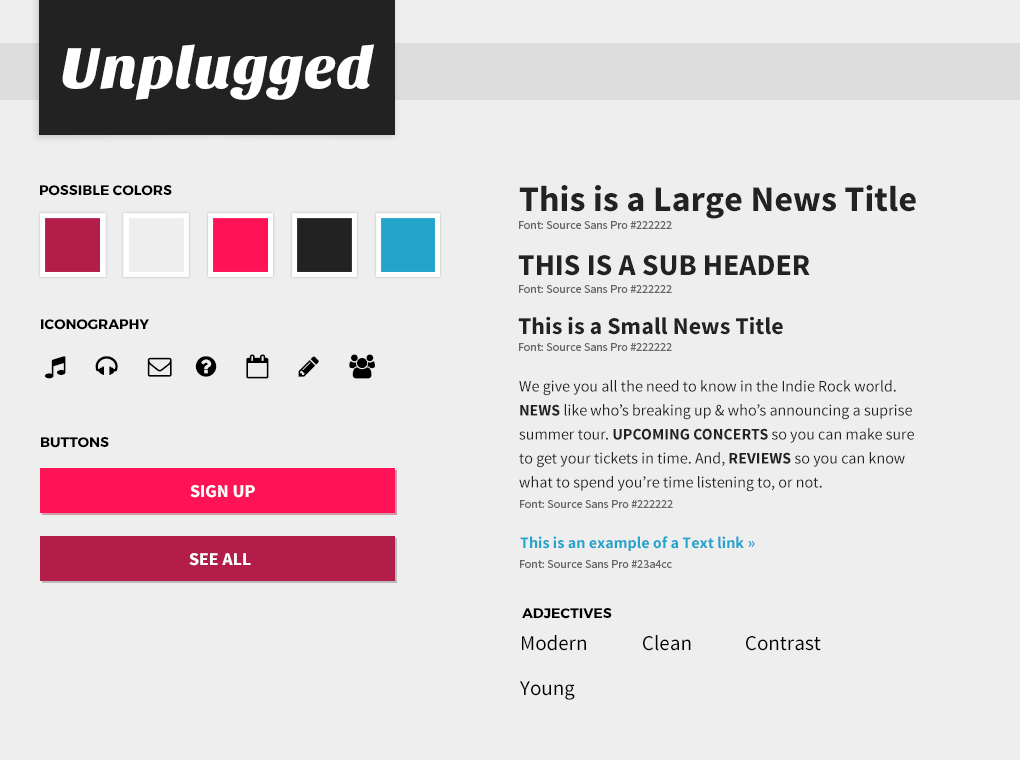
<style>
.page{position:relative;width:1020px;height:760px;background:#eeeeee}
.page>*{position:absolute;margin:0}
.t1{font:60px "SansitaOne";color:#ffffff}
.t2{font:14px "Montserrat-Bold";color:#000000;text-transform:uppercase}
.t3{font:36px "SourceSansPro-Bold";color:#222222}
.t4{font:12px "SourceSansPro-Regular";color:#666666}
.t5{font:30px "SourceSansPro-Bold";color:#222222;text-transform:uppercase}
.t6{font:24px "SourceSansPro-Bold";color:#222222}
.t7{font:14px "Montserrat-Bold";color:#000000}
.t8{font:16px/24px "SourceSansPro-Regular";color:#222222}
.t9{font:16px/24px "SourceSansPro-Bold";color:#222222}
.t10{font:16px/24px "SourceSansPro-Bold";color:#222222;text-transform:uppercase}
.t11{font:18px "SourceSansPro-Bold";color:#ffffff}
.t12{font:16px "SourceSansPro-Bold";color:#23a4cc}
.t13{font:21px "SourceSansPro-Regular";color:#000000}
</style>
<div class="page">
<p class="t1" style="left:62px;top:44px;width:312px;height:56px">Unplugged</p>
<p class="t2" style="left:40px;top:185px;width:132px;height:11px">Possible Colors</p>
<p class="t3" style="left:519px;top:185px;width:397px;height:34px">This is a Large News Title</p>
<p class="t4" style="left:519px;top:221px;width:153px;height:8px">Font: Source Sans Pro #222222</p>
<p class="t5" style="left:518px;top:255px;width:292px;height:21px">This is a Sub Header</p>
<p class="t4" style="left:519px;top:285px;width:153px;height:8px">Font: Source Sans Pro #222222</p>
<p class="t6" style="left:518px;top:316px;width:265px;height:19px">This is a Small News Title</p>
<p class="t7" style="left:41px;top:319px;width:108px;height:11px">ICONOGRAPHY</p>
<p class="t4" style="left:519px;top:343px;width:153px;height:8px">Font: Source Sans Pro #222222</p>
<p class="t8" style="left:519px;top:380px;width:395px;height:112px">We give you all the need to know in the Indie Rock world. <span class="t9">NEWS </span>like who’s breaking up &amp; who’s announcing a suprise summer tour. <span class="t10">Upcoming concerts</span> so you can make sure to get your tickets in time. And, <span class="t10">reviews </span>so you can know what to spend you’re time listening to, or not.</p>
<p class="t7" style="left:41px;top:437px;width:68px;height:11px">BUTTONS</p>
<p class="t11" style="left:190px;top:485px;width:65px;height:13px">SIGN UP</p>
<p class="t4" style="left:520px;top:500px;width:153px;height:8px">Font: Source Sans Pro #222222</p>
<p class="t12" style="left:520px;top:536px;width:235px;height:15px">This is an example of a Text link »</p>
<p class="t11" style="left:189px;top:553px;width:62px;height:13px">SEE ALL</p>
<p class="t4" style="left:520px;top:560px;width:152px;height:8px">Font: Source Sans Pro #23a4cc</p>
<p class="t2" style="left:522px;top:608px;width:90px;height:11px">Adjectives</p>
<p class="t13" style="left:522px;top:635px;width:64px;height:16px">Modern</p>
<p class="t13" style="left:643px;top:635px;width:48px;height:16px">Clean</p>
<p class="t13" style="left:746px;top:636px;width:75px;height:15px">Contrast</p>
<p class="t13" style="left:519px;top:681px;width:56px;height:19px">Young</p>
</div>
